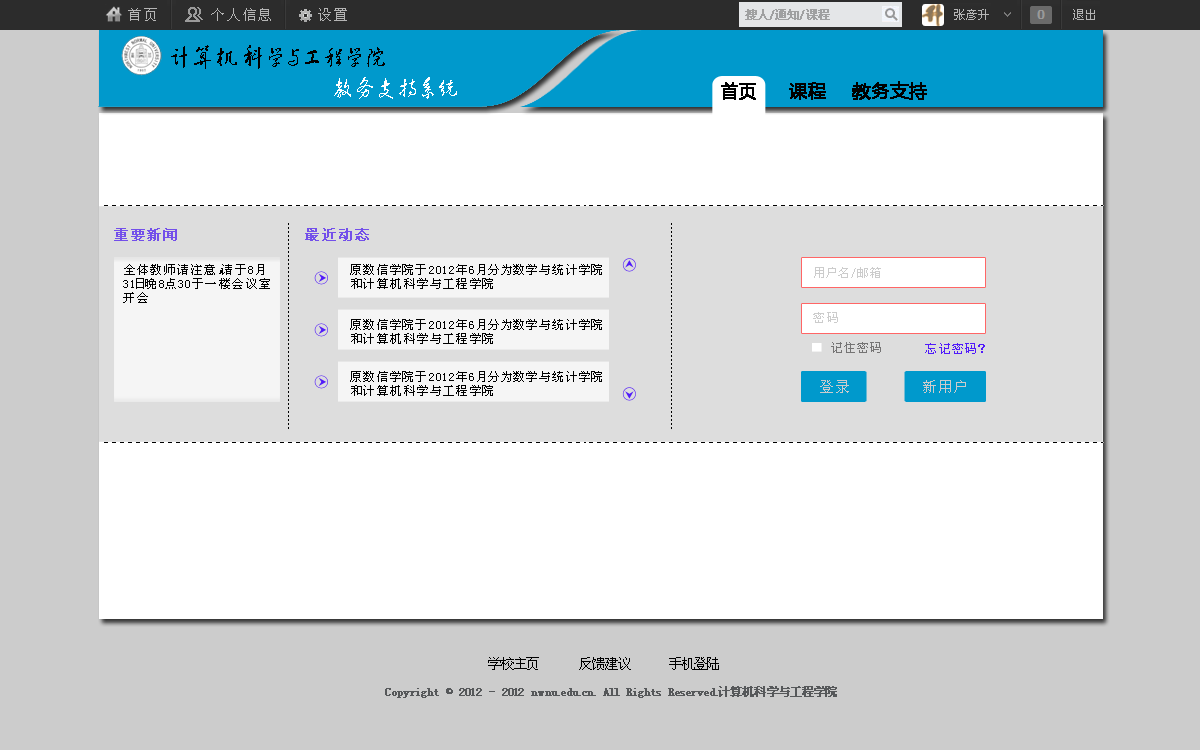
<style>
.page{position:relative;width:1200px;height:750px;background:#ffffff}
.page>*{position:absolute;margin:0}
.t1{font:14px "SimSun";letter-spacing:0.2em;color:#b5b5b5}
.t2{font:12px "SimSun";color:#9fa0a1;font-weight:bold}
.t3{font:25px "FZHCJW--GB1-0";letter-spacing:0.2em;color:#000000}
.t4{font:25px "FZHCJW--GB1-0";letter-spacing:0.2em;color:#ffffff}
.t5{font:18px "MicrosoftYaHei";color:#000000;font-weight:bold}
.t6{font:18px "MicrosoftYaHei";color:#010000;font-weight:bold}
.t7{font:14px "SimSun";letter-spacing:0.2em;color:#734fea;font-weight:bold}
.t8{font:12px/14px "SimSun";letter-spacing:0.2em;color:#000000}
.t9{font:12px "SimSun";letter-spacing:0.2em;color:#cccccc}
.t10{font:12px "SimSun";letter-spacing:0.2em;color:#757474}
.t11{font:12px "SimSun";letter-spacing:0.2em;color:#511bfa}
.t12{font:14px "SimSun";letter-spacing:0.2em;color:#cccccc}
.t13{font:14px "SimSun";color:#000000}
.t14{font:12px "SimSun";color:#56585a;font-weight:bold}
</style>
<div class="page">
<p class="t1" style="left:128px;top:8px;width:29px;height:13px">首页</p>
<p class="t1" style="left:211px;top:8px;width:60px;height:13px">个人信息</p>
<p class="t1" style="left:318px;top:8px;width:29px;height:13px">设置</p>
<p class="t2" style="left:745px;top:9px;width:85px;height:11px">搜人/通知/课程</p>
<p class="t3" style="left:171px;top:45px;width:214px;height:24px">计算机科学与工程学院</p>
<p class="t4" style="left:334px;top:77px;width:123px;height:22px">教务支持系统</p>
<p class="t5" style="left:721px;top:82px;width:35px;height:18px">首页</p>
<p class="t6" style="left:789px;top:82px;width:37px;height:18px">课程</p>
<p class="t5" style="left:852px;top:81px;width:75px;height:19px">教务支持</p>
<p class="t7" style="left:114px;top:228px;width:63px;height:13px">重要新闻</p>
<p class="t7" style="left:305px;top:228px;width:64px;height:13px">最近动态</p>
<p class="t8" style="left:123px;top:264px;width:147px;height:39px">全体教师请注意，请于8月31日晚8点30于一楼会议室开会</p>
<p class="t8" style="left:350px;top:264px;width:252px;height:25px">原数信学院于2012年6月分为数学与统计学院和计算机科学与工程学院</p>
<p class="t9" style="left:814px;top:267px;width:67px;height:11px">用户名/邮箱</p>
<p class="t9" style="left:813px;top:312px;width:25px;height:11px">密码</p>
<p class="t8" style="left:350px;top:319px;width:252px;height:25px">原数信学院于2012年6月分为数学与统计学院和计算机科学与工程学院</p>
<p class="t10" style="left:831px;top:342px;width:50px;height:11px">记住密码</p>
<p class="t11" style="left:925px;top:343px;width:60px;height:11px">忘记密码？</p>
<p class="t8" style="left:350px;top:371px;width:252px;height:25px">原数信学院于2012年6月分为数学与统计学院和计算机科学与工程学院</p>
<p class="t12" style="left:820px;top:380px;width:29px;height:13px">登录</p>
<p class="t12" style="left:923px;top:380px;width:43px;height:13px">新用户</p>
<p class="t13" style="left:488px;top:657px;width:51px;height:13px">学校主页</p>
<p class="t13" style="left:579px;top:657px;width:52px;height:13px">反馈建议</p>
<p class="t13" style="left:669px;top:657px;width:50px;height:13px">手机登陆</p>
<p class="t14" style="left:385px;top:686px;width:452px;height:12px">Copyright © 2012 - 2012 nwnu.edu.cn. All Rights Reserved.计算机科学与工程学院</p>
</div>
